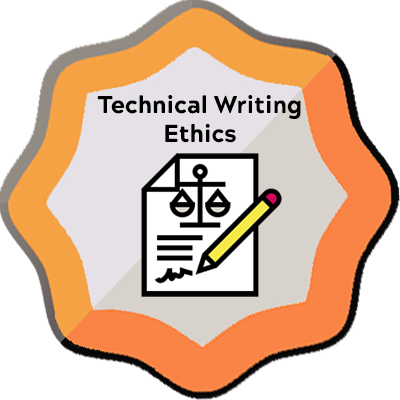
<style>
.page{position:relative;width:400px;height:400px;background:#ffffff}
.page>*{position:absolute;margin:0}
.t1{font:24px "AcherusGrotesqueExtraBold";color:#000000}
</style>
<div class="page">
<p class="t1" style="left:97px;top:95px;width:204px;height:48px;text-align:center">Technical Writing<br>Ethics</p>
</div>
